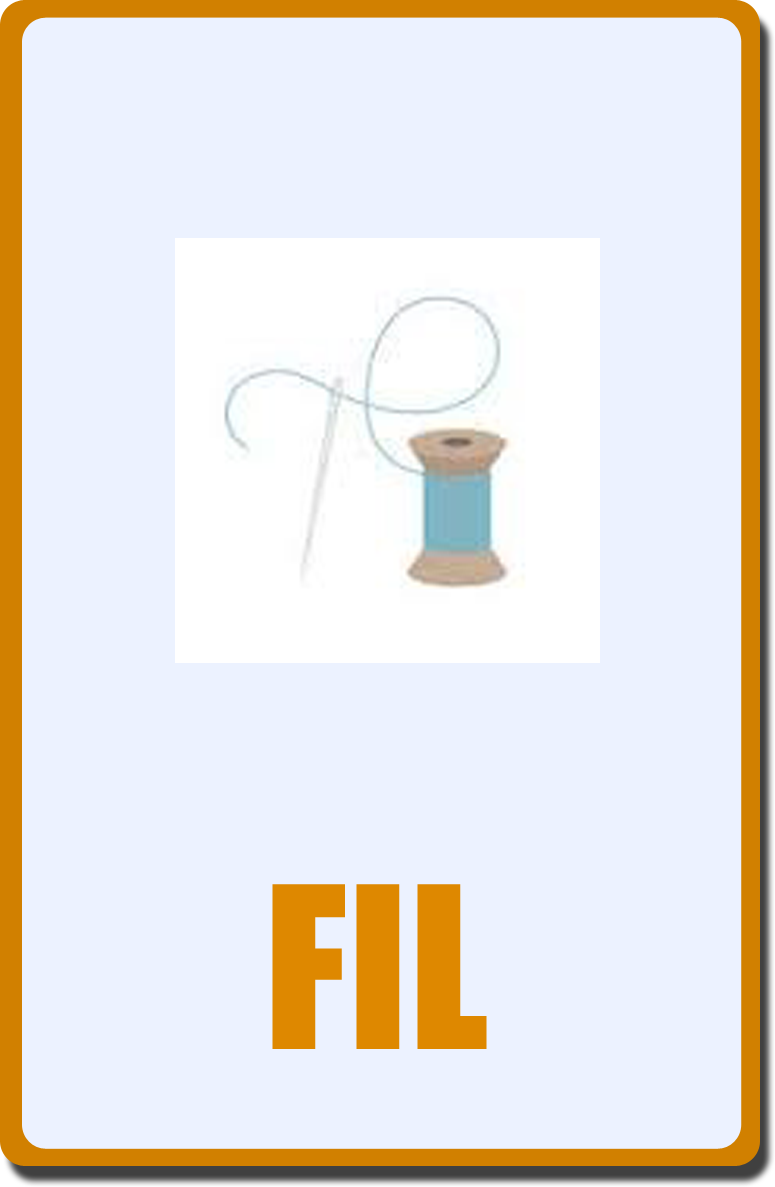
<style>
.page{position:relative;width:775px;height:1187px;background:#ecf2ff}
.page>*{position:absolute;margin:0}
.t1{font:208.3px "Impact";letter-spacing:0.005em;color:#de8800}
</style>
<div class="page">
<p class="t1" style="left:272px;top:884px;width:215px;height:165px">FIL</p>
</div>
